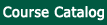
<style>
.page{position:relative;width:107px;height:25px;background:#005941}
.page>*{position:absolute;margin:0}
.t1{font:14px "Tahoma";letter-spacing:0.02em;color:#ffffff;font-weight:bold}
</style>
<div class="page">
<p class="t1" style="left:3px;top:6px;width:101px;height:15px">Course Catalog</p>
</div>
